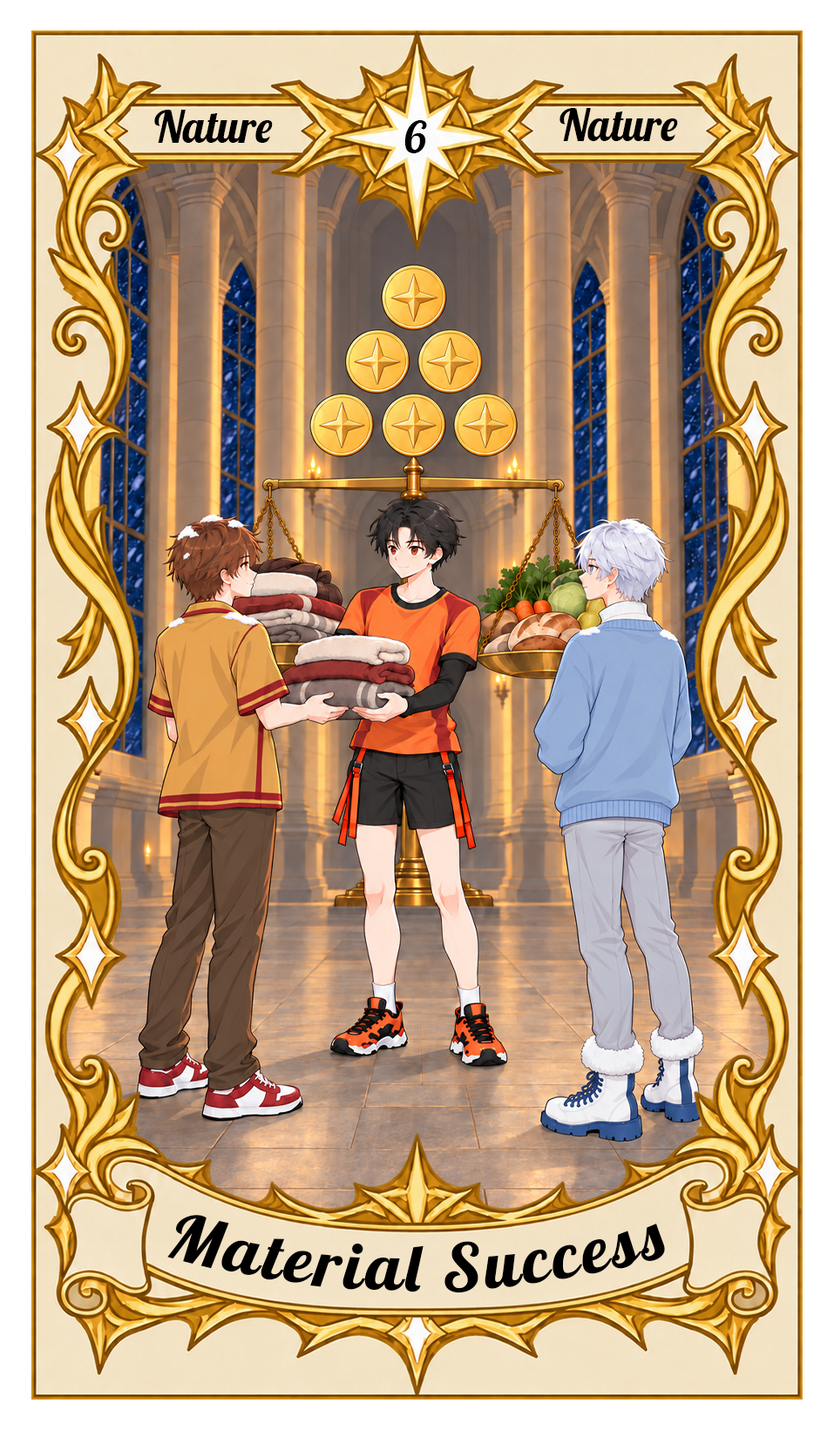
<style>
.page{position:relative;width:834px;height:1430px}
.page>*{position:absolute;margin:0}
.t1{font:43.6px "Lobster-Regular";color:#000000}
.t2{font:65.3px "Lobster-Regular";letter-spacing:0.05em;color:#000000}
</style>
<div class="page">
<p class="t1" style="left:154px;top:110px;width:119px;height:33px">Nature</p>
<p class="t1" style="left:559px;top:108px;width:119px;height:33px">Nature</p>
<p class="t1" style="left:404px;top:120px;width:23px;height:33px">6</p>
<p class="t2" style="left:167px;top:1215px;width:498px;height:79px">Material Success</p>
</div>
